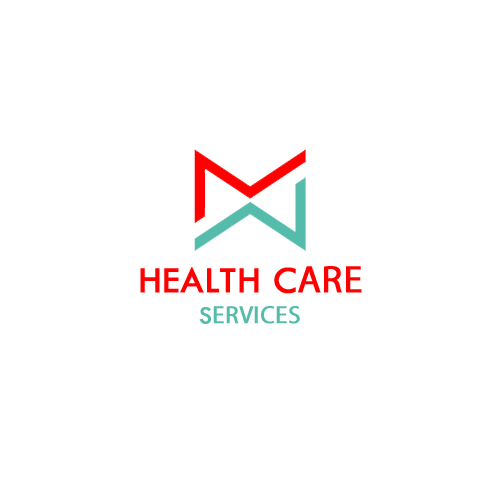
<style>
.page{position:relative;width:500px;height:500px;background:#ffffff}
.page>*{position:absolute;margin:0}
.t1{font:38.2px "TwCenMT-Regular";color:#ff0000;font-weight:bold}
.t2{font:38.2px "MyriadPro-Regular";color:#ff0000;font-weight:bold}
.t3{font:24.7px "MyriadPro-Regular";color:#55bbaa;font-weight:bold}
.t4{font:24.7px "TwCenMT-Regular";color:#55bbaa;font-weight:bold}
</style>
<div class="page">
<p class="t1" style="left:140px;top:266px;width:222px;height:28px">HEALTH C<span class="t2">ARE</span></p>
<p class="t3" style="left:199px;top:306px;width:101px;height:18px"><span class="t4">S</span>ERVICES</p>
</div>
